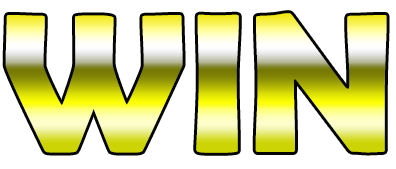
<style>
.page{position:relative;width:396px;height:169px;background:#ffffff}
.page>*{position:absolute;margin:0}
.t1{font:200px "BerlinSansFBDemi-Bold"}
</style>
<div class="page">
<p class="t1" style="left:5px;top:13px;width:382px;height:140px">WIN</p>
</div>
